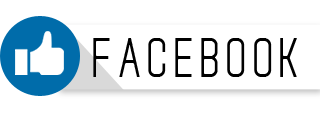
<style>
.page{position:relative;width:320px;height:117px;background:#ffffff}
.page>*{position:absolute;margin:0}
.t1{font:49.6px "078MKSDMediumCondensed";letter-spacing:0.14em;color:#000000}
</style>
<div class="page">
<p class="t1" style="left:93px;top:38px;width:204px;height:39px">FACEBOOK</p>
</div>
